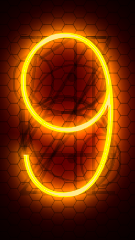
<style>
.page{position:relative;width:135px;height:240px}
.page>*{position:absolute;margin:0}
.t1{font:220px "Inter-Thin"}
</style>
<div class="page">
<p class="t1" style="left:20px;top:32px;width:94px;height:166px">9</p>
</div>
